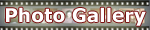
<style>
.page{position:relative;width:150px;height:30px}
.page>*{position:absolute;margin:0}
.t1{font:18.7px "Verdana-Bold";color:#ffffff}
</style>
<div class="page">
<p class="t1" style="left:6px;top:7px;width:140px;height:19px">Photo Gallery</p>
</div>
